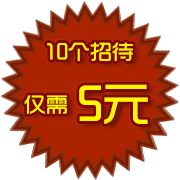
<style>
.page{position:relative;width:180px;height:180px;background:#ffffff}
.page>*{position:absolute;margin:0}
.t1{font:22px "TRENDS";color:#fff600}
.t2{font:47.6px "TRENDS";color:#fff600}
</style>
<div class="page">
<p class="t1" style="left:24px;top:42px;width:109px;height:72px">10个招待<br><br>仅需</p>
<p class="t2" style="left:79px;top:84px;width:69px;height:40px">5元</p>
</div>
